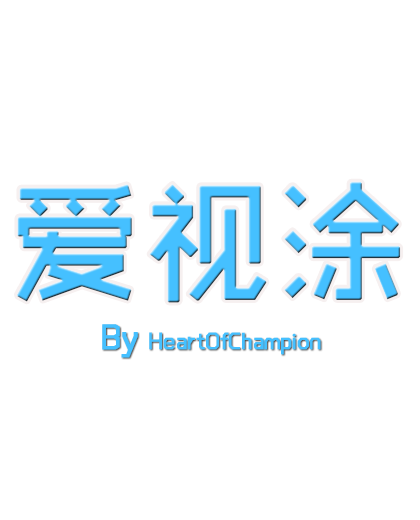
<style>
.page{position:relative;width:420px;height:520px;background:#ffffff}
.page>*{position:absolute;margin:0}
.t1{font:131.1px "RTWSShangGoG0v1-Regular";color:#45c0ff;font-weight:bold}
.t2{font:24px "RTWSShangGoG0v1-Regular";color:#45c0ff;font-weight:bold}
.t3{font:36px "RTWSShangGoG0v1-Regular";color:#45c0ff;font-weight:bold}
</style>
<div class="page">
<p class="t1" style="left:16px;top:181px;width:385px;height:122px">爱视涂</p>
<p class="t2" style="left:102px;top:324px;width:219px;height:34px"><span class="t3">By </span>HeartOfChampion</p>
</div>
